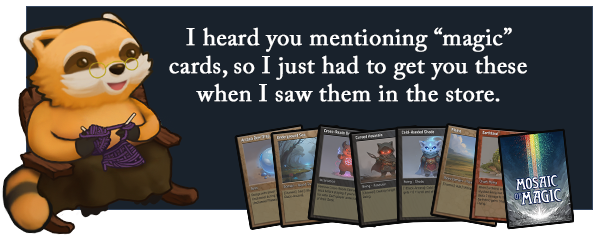
<style>
.page{position:relative;width:600px;height:235px;background:#19222c}
.page>*{position:absolute;margin:0}
.t1{font:24px/28px "ACaslonPro-Regular";color:#ffffff;font-weight:bold}
</style>
<div class="page">
<p class="t1" style="left:169px;top:27px;width:358px;height:75px;text-align:center">I heard you mentioning “magic” cards, so I just had to get you these when I saw them in the store.</p>
</div>
